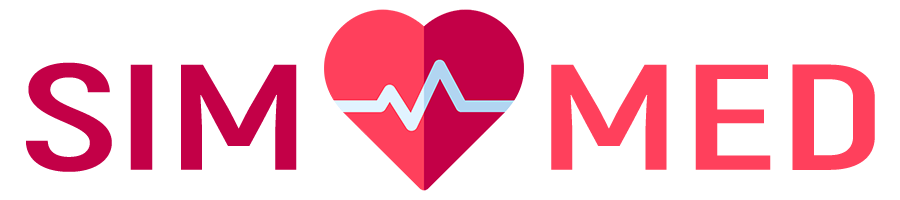
<style>
.page{position:relative;width:900px;height:200px;background:#ffffff}
.page>*{position:absolute;margin:0}
.t1{font:150px "Akrobat-Bold";color:#c30047;scale:1.4 1}
.t2{font:150px "Akrobat-Bold";color:#ff405c;scale:1.4 1}
</style>
<div class="page">
<p class="t1" style="left:26px;top:62px;width:849px;height:110px">SIM<span class="t2">     MED</span></p>
</div>
